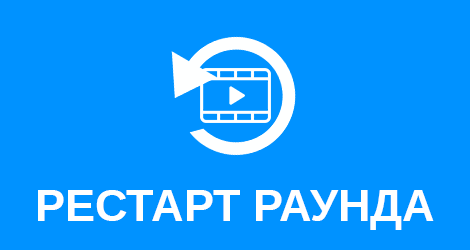
<style>
.page{position:relative;width:470px;height:250px;background:#0092ff}
.page>*{position:absolute;margin:0}
.t1{font:45px "LiberationSans-Bold";color:#ffffff;text-transform:uppercase}
</style>
<div class="page">
<p class="t1" style="left:38px;top:190px;width:396px;height:40px">рестарт раунда</p>
</div>
